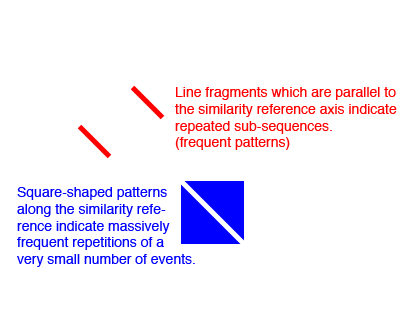
<style>
.page{position:relative;width:408px;height:310px;background:#ffffff}
.page>*{position:absolute;margin:0}
.t1{font:14px "Helvetica";color:#ff0000}
.t2{font:14px "Helvetica";color:#0000ff}
</style>
<div class="page">
<p class="t1" style="left:175px;top:87px;width:222px;height:63px">Line fragments which are parallel to<br>the similarity reference axis indicate <br>repeated sub-sequences.<br>(frequent patterns)</p>
<p class="t2" style="left:17px;top:187px;width:178px;height:80px">Square-shaped patterns<br>along the similarity refe-<br>rence indicate massively<br>frequent repetitions of a<br>very small number of events.</p>
</div>
